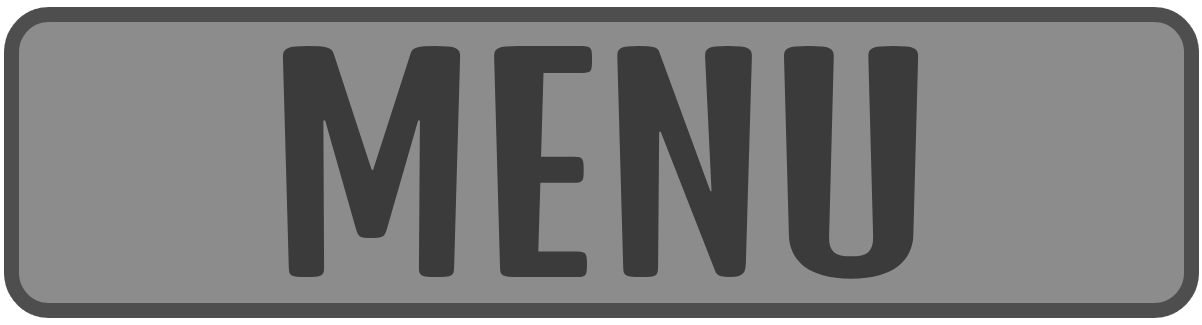
<style>
.page{position:relative;width:1202px;height:325px;background:#8c8c8c}
.page>*{position:absolute;margin:0}
.t1{font:280px "DenkOne-Regular";color:#3b3b3b}
</style>
<div class="page">
<p class="t1" style="left:282px;top:45px;width:637px;height:234px">MENU</p>
</div>
